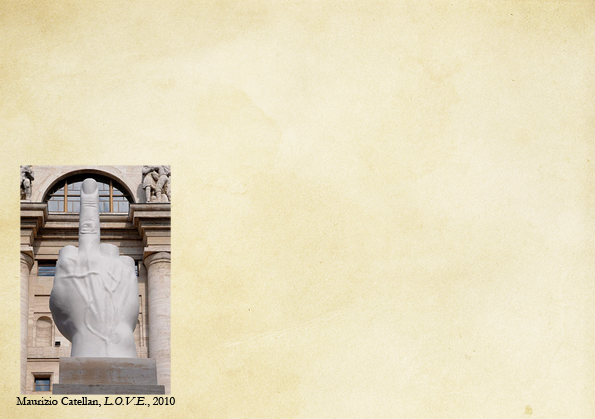
<style>
.page{position:relative;width:595px;height:419px}
.page>*{position:absolute;margin:0}
.t1{font:12px "Garamond";color:#000000}
.t2{font:12px "Garamond-Italic";color:#000000}
</style>
<div class="page">
<p class="t1" style="left:16px;top:397px;width:159px;height:10px">Maurizio Catellan, <span class="t2">L.O.V.E.</span>, 2010</p>
</div>
